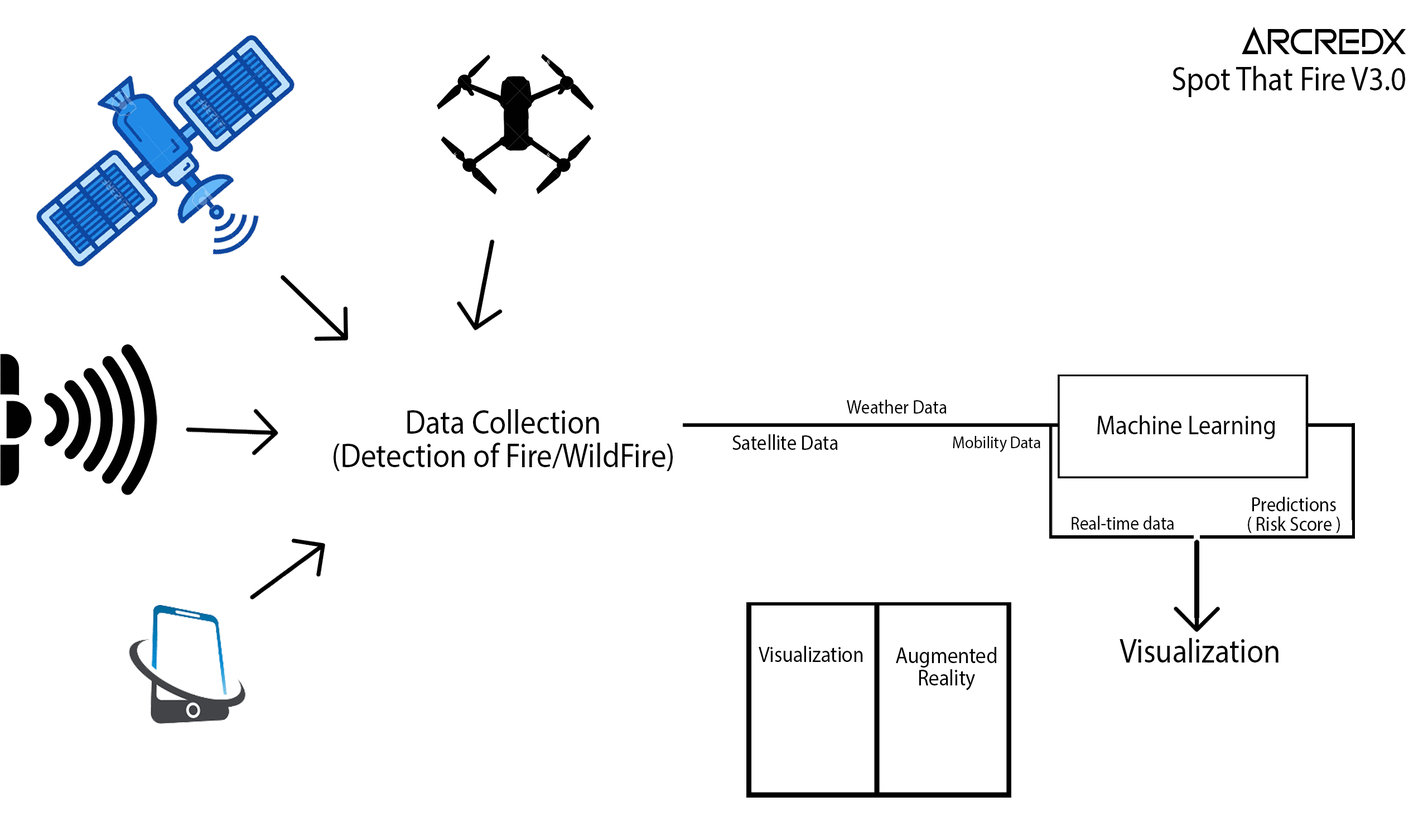
<style>
.page{position:relative;width:1428px;height:835px;background:#ffffff}
.page>*{position:absolute;margin:0}
.t1{font:36.8px "MandatoryPlaything";color:#000000;scale:0.91 1}
.t2{font:33.8px "MyriadPro-Regular";color:#000000;scale:0.91 1}
.t3{font:19.5px "MyriadPro-Regular";color:#000000;scale:0.91 1}
.t4{font:33.8px/33.5px "MyriadPro-Regular";color:#000000;scale:0.91 1}
.t5{font:26.6px "MyriadPro-Regular";color:#000000;scale:0.91 1}
.t6{font:21.4px "MyriadPro-Regular";color:#000000;scale:0.91 1}
.t7{font:17.4px "MyriadPro-Regular";color:#000000;scale:0.91 1}
.t8{font:20.1px/19.9px "MyriadPro-Regular";color:#000000;scale:0.91 1}
.t9{font:19px "MyriadPro-Regular";color:#000000;scale:0.91 1}
.t10{font:22.1px "MyriadPro-Regular";color:#000000;scale:0.91 1}
.t11{font:22.6px/22.5px "MyriadPro-Regular";color:#000000;scale:0.91 1}
</style>
<div class="page">
<p class="t1" style="left:1242px;top:26px;width:165px;height:28px">ARCREDX</p>
<p class="t2" style="left:1173px;top:66px;width:233px;height:31px">Spot That Fire V3.0</p>
<p class="t3" style="left:847px;top:400px;width:100px;height:13px">Weather Data</p>
<p class="t4" style="left:334px;top:409px;width:339px;height:62px;text-align:center">Data Collection<br>(Detection of Fire/WildFire)</p>
<p class="t5" style="left:1098px;top:415px;width:178px;height:24px">Machine Learning</p>
<p class="t6" style="left:733px;top:434px;width:105px;height:16px">Satellite Data</p>
<p class="t7" style="left:953px;top:436px;width:88px;height:16px">Mobility Data</p>
<p class="t8" style="left:1248px;top:497px;width:92px;height:36px;text-align:center">Predictions<br>( Risk Score )</p>
<p class="t9" style="left:1072px;top:516px;width:102px;height:14px">Real-time data</p>
<p class="t2" style="left:1120px;top:638px;width:159px;height:24px">Visualization</p>
<p class="t10" style="left:759px;top:646px;width:104px;height:16px">Visualization</p>
<p class="t11" style="left:896px;top:647px;width:101px;height:43px;text-align:center">Augmented <br>Reality</p>
</div>
